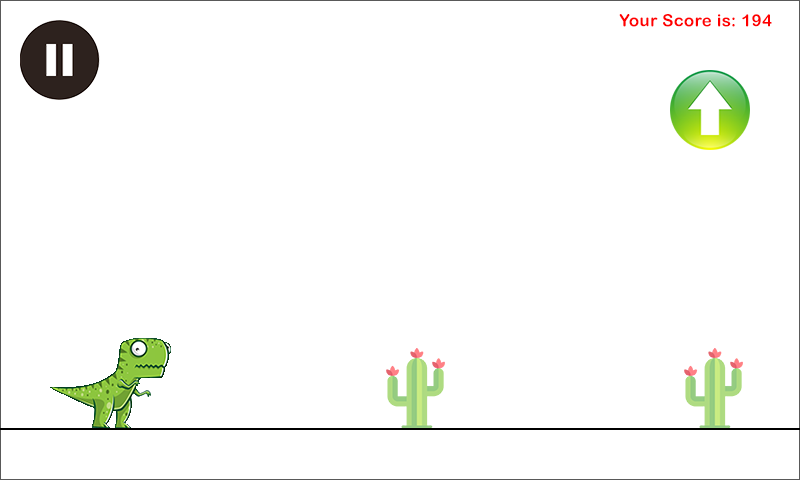
<style>
.page{position:relative;width:800px;height:480px;background:#ffffff}
.page>*{position:absolute;margin:0}
.t1{font:16.7px "ArialRoundedMTBold";letter-spacing:0.025em;color:#ff0000}
</style>
<div class="page">
<p class="t1" style="left:619px;top:14px;width:153px;height:13px">Your Score is: 194</p>
</div>
